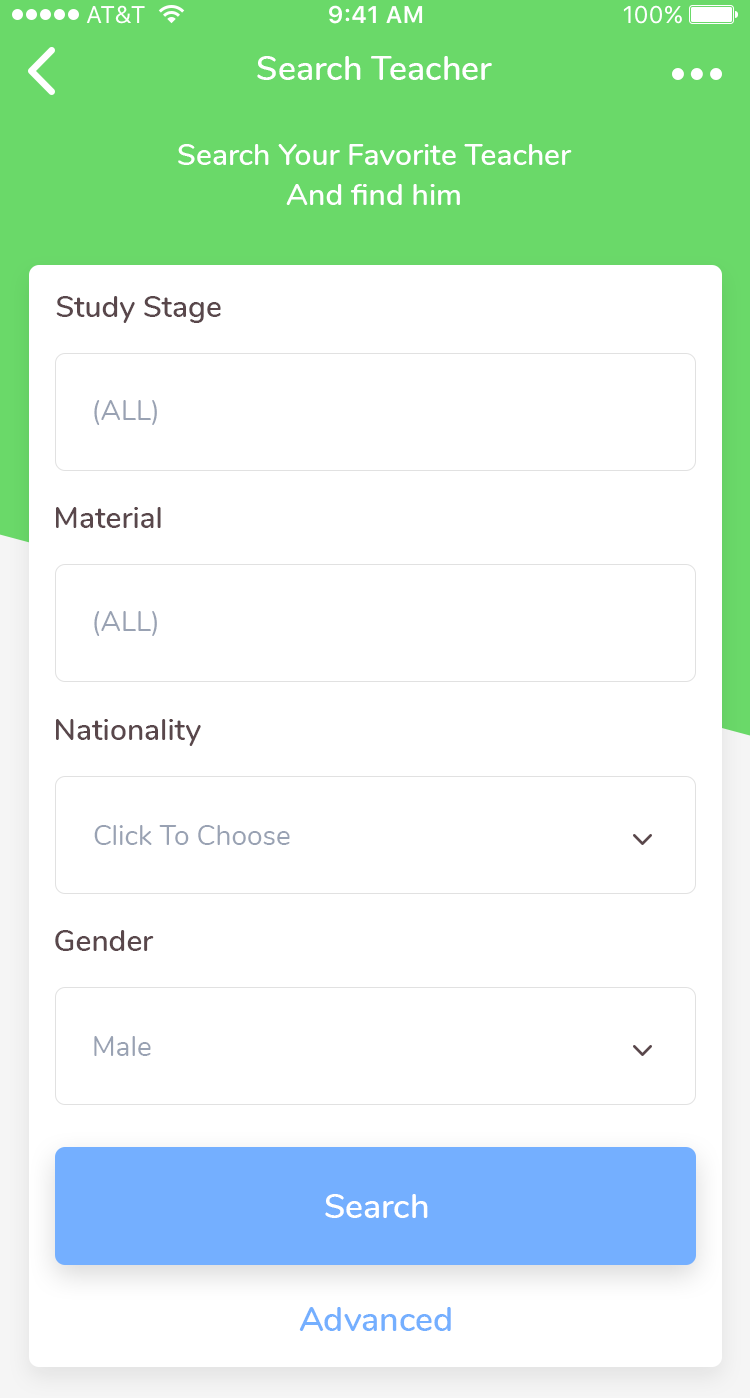
<style>
.page{position:relative;width:750px;height:1398px;background:#ffffff}
.page>*{position:absolute;margin:0}
.t1{font:34px "Nunito-SemiBold";color:#ffffff}
.t2{font:30px/40px "Nunito-SemiBold";color:#ffffff}
.t3{font:30px "Nunito-SemiBold";color:#59474b}
.t4{font:28px "Nunito-Regular";color:#99a2b3}
.t5{font:34px "Nunito-SemiBold";color:#74afff}
</style>
<div class="page">
<p class="t1" style="left:257px;top:56px;width:235px;height:24px">Search Teacher</p>
<p class="t2" style="left:178px;top:144px;width:394px;height:61px;text-align:center">Search Your Favorite Teacher<br>And find him</p>
<p class="t3" style="left:56px;top:296px;width:165px;height:27px">Study Stage</p>
<p class="t4" style="left:94px;top:400px;width:63px;height:25px">(ALL)</p>
<p class="t3" style="left:56px;top:507px;width:105px;height:21px">Material</p>
<p class="t4" style="left:94px;top:611px;width:63px;height:25px">(ALL)</p>
<p class="t3" style="left:56px;top:719px;width:145px;height:27px">Nationality</p>
<p class="t4" style="left:94px;top:825px;width:196px;height:20px">Click To Choose</p>
<p class="t3" style="left:55px;top:930px;width:99px;height:21px">Gender</p>
<p class="t4" style="left:94px;top:1036px;width:57px;height:20px">Male</p>
<p class="t1" style="left:325px;top:1194px;width:103px;height:24px">Search</p>
<p class="t5" style="left:299px;top:1307px;width:152px;height:24px">Advanced</p>
</div>
